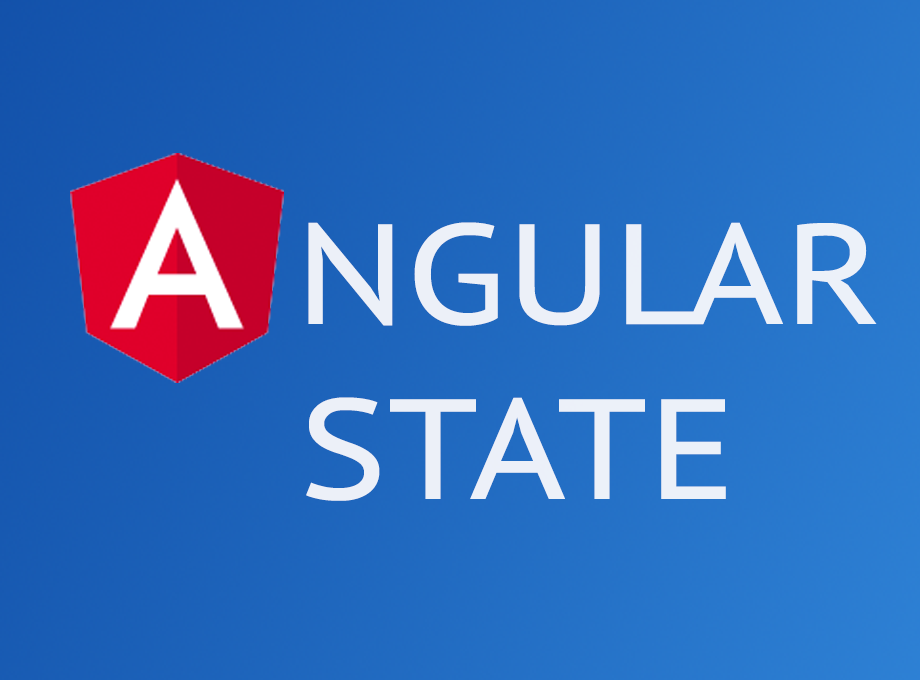
<style>
.page{position:relative;width:920px;height:680px}
.page>*{position:absolute;margin:0}
.t1{font:142.5px "PTSans-Caption";color:#fbfcfe;text-transform:uppercase;scale:1.06 1}
</style>
<div class="page">
<p class="t1" style="left:308px;top:222px;width:569px;height:104px;opacity:0.9">ngular</p>
<p class="t1" style="left:306px;top:397px;width:420px;height:104px;opacity:0.9">STATE</p>
</div>
